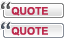
<style>
.page{position:relative;width:65px;height:40px;background:#ffffff}
.page>*{position:absolute;margin:0}
.t1{font:10.4px "Arial-BoldMT";color:#bc2a4d}
</style>
<div class="page">
<p class="t1" style="left:11px;top:7px;width:37px;height:9px">QUOTE</p>
<p class="t1" style="left:11px;top:27px;width:37px;height:9px">QUOTE</p>
</div>
